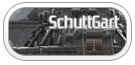
<style>
.page{position:relative;width:135px;height:65px;background:#ffffff}
.page>*{position:absolute;margin:0}
.t1{font:18px "Zrnic";color:#f4f4f4}
</style>
<div class="page">
<p class="t1" style="left:49px;top:16px;width:70px;height:12px">SchuttGart</p>
</div>
